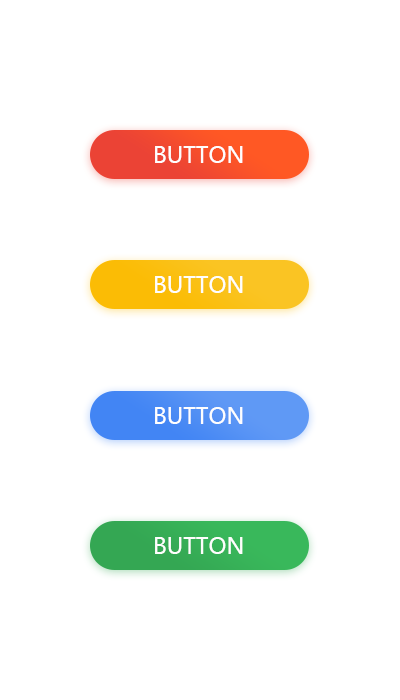
<style>
.page{position:relative;width:400px;height:700px;background:#ffffff}
.page>*{position:absolute;margin:0}
.t1{font:22px "MicrosoftYaHei";color:#fefefe}
</style>
<div class="page">
<p class="t1" style="left:155px;top:146px;width:88px;height:17px">BUTTON</p>
<p class="t1" style="left:155px;top:276px;width:88px;height:17px">BUTTON</p>
<p class="t1" style="left:155px;top:407px;width:88px;height:17px">BUTTON</p>
<p class="t1" style="left:155px;top:537px;width:88px;height:17px">BUTTON</p>
</div>
